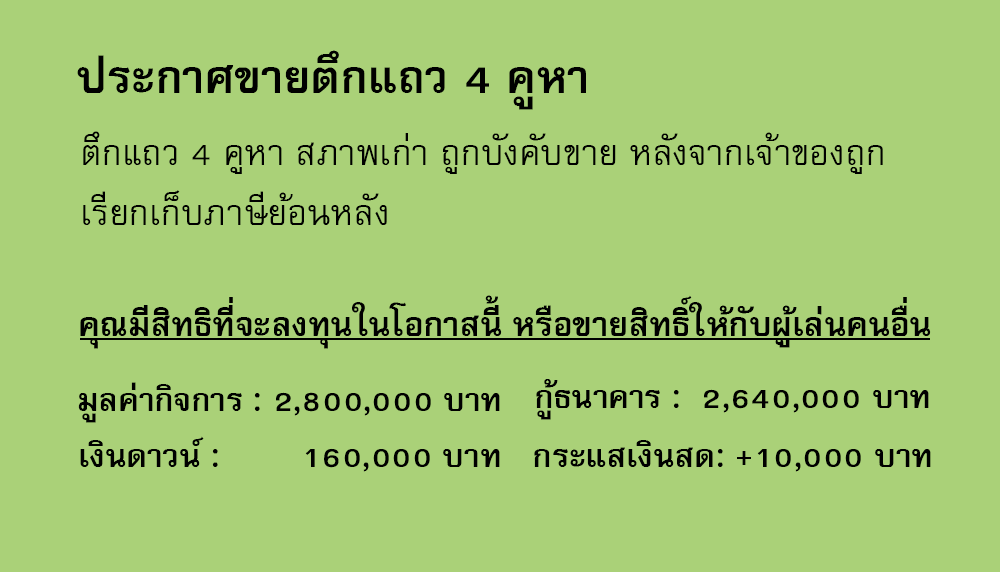
<style>
.page{position:relative;width:1000px;height:572px;background:#aad178}
.page>*{position:absolute;margin:0}
.t1{font:64px "FreesiaUPCBold";color:#000000}
.t2{font:50px/60px "FreesiaUPC";color:#000000}
.t3{font:47px "FreesiaUPCBold";color:#000000}
.t4{font:45px "FreesiaUPCBold";color:#000000}
</style>
<div class="page">
<p class="t1" style="left:77px;top:50px;width:509px;height:60px">ประกาศขายตึกแถว 4 คูหา</p>
<p class="t2" style="left:83px;top:131px;width:800px;height:94px">ตึกแถว 4 คูหา สภาพเก่า ถูกบังคับขาย หลังจากเจ้าของถูก<br>เรียกเก็บภาษีย้อนหลัง</p>
<p class="t3" style="left:80px;top:295px;width:851px;height:54px">คุณมีสิทธิที่จะลงทุนในโอกาสนี้ หรือขายสิทธิ์ให้กับผู้เล่นคนอื่น</p>
<p class="t4" style="left:78px;top:382px;width:422px;height:41px">มูลค่ากิจการ : 2,800,000 บาท</p>
<p class="t4" style="left:536px;top:379px;width:393px;height:41px">กู้ธนาคาร :  2,640,000 บาท</p>
<p class="t4" style="left:80px;top:436px;width:420px;height:36px">เงินดาวน์ :        160,000 บาท</p>
<p class="t4" style="left:534px;top:440px;width:397px;height:32px">กระแสเงินสด: +10,000 บาท</p>
</div>
